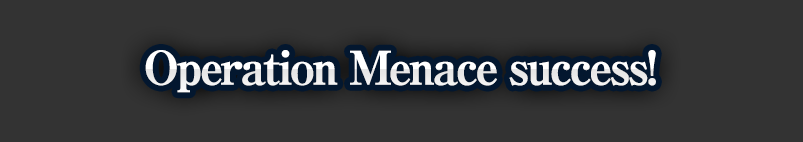
<style>
.page{position:relative;width:803px;height:142px;background:#333333}
.page>*{position:absolute;margin:0}
.t1{font:46px "RyuminPro-ExBold";letter-spacing:-0.08em;color:#ffffff;font-weight:bold}
</style>
<div class="page">
<p class="t1" style="left:145px;top:50px;width:511px;height:43px">Operation Menace success!</p>
</div>
